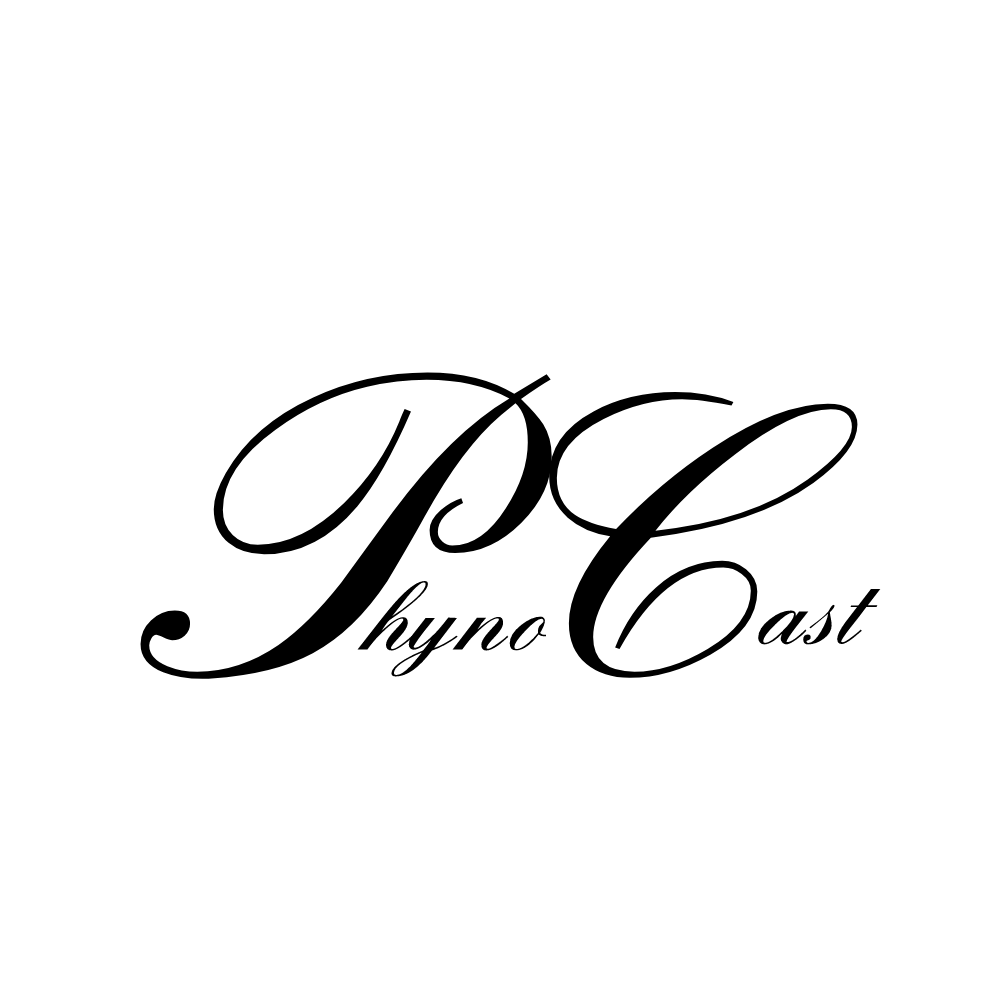
<style>
.page{position:relative;width:1000px;height:1000px;background:#ffffff}
.page>*{position:absolute;margin:0}
.t1{font:433.4px "EnglandHandDB";color:#000000}
.t2{font:391.4px "EnglandHandDB";color:#000000}
.t3{font:102.1px "EnglandHandDB";color:#000000}
</style>
<div class="page">
<p class="t1" style="left:140px;top:372px;width:412px;height:307px">P</p>
<p class="t2" style="left:549px;top:392px;width:309px;height:286px">C</p>
<p class="t3" style="left:357px;top:581px;width:189px;height:96px">hyno</p>
<p class="t3" style="left:758px;top:588px;width:123px;height:57px">ast</p>
</div>
